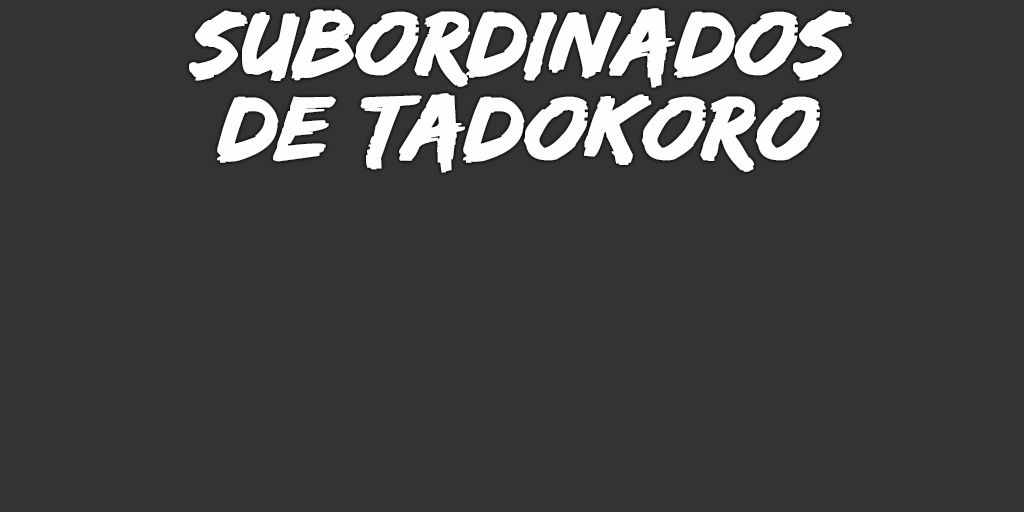
<style>
.page{position:relative;width:1024px;height:512px;background:#333333}
.page>*{position:absolute;margin:0}
.t1{font:94px/85px "EdoSZ";color:#fefefe;font-weight:bold;font-style:italic;scale:1.04 1}
</style>
<div class="page">
<p class="t1" style="left:189px;top:8px;width:663px;height:165px;text-align:center">subordinados<br>DE TADOKORO</p>
</div>
